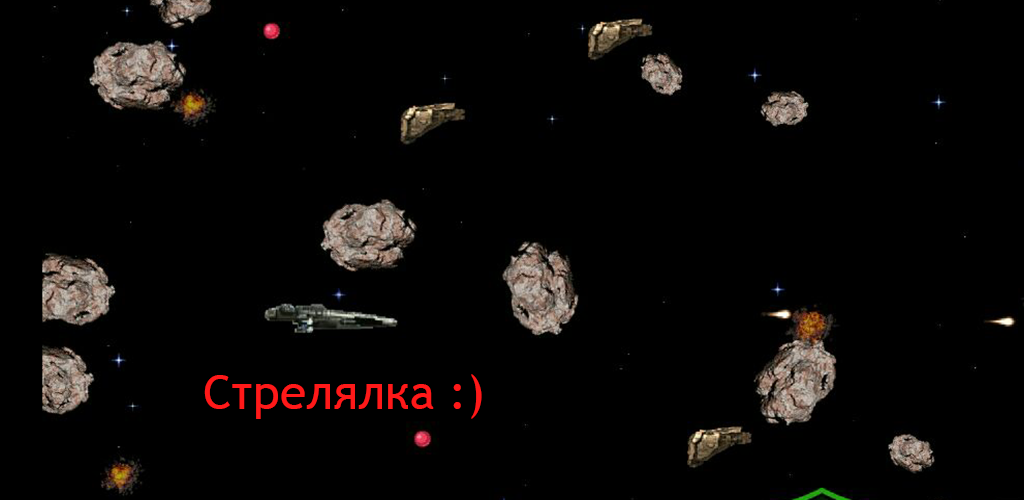
<style>
.page{position:relative;width:1024px;height:500px;background:#000000}
.page>*{position:absolute;margin:0}
.t1{font:48px "TrebuchetMS";color:#ff1919}
</style>
<div class="page">
<p class="t1" style="left:204px;top:374px;width:278px;height:45px">Стрелялка :)</p>
</div>
